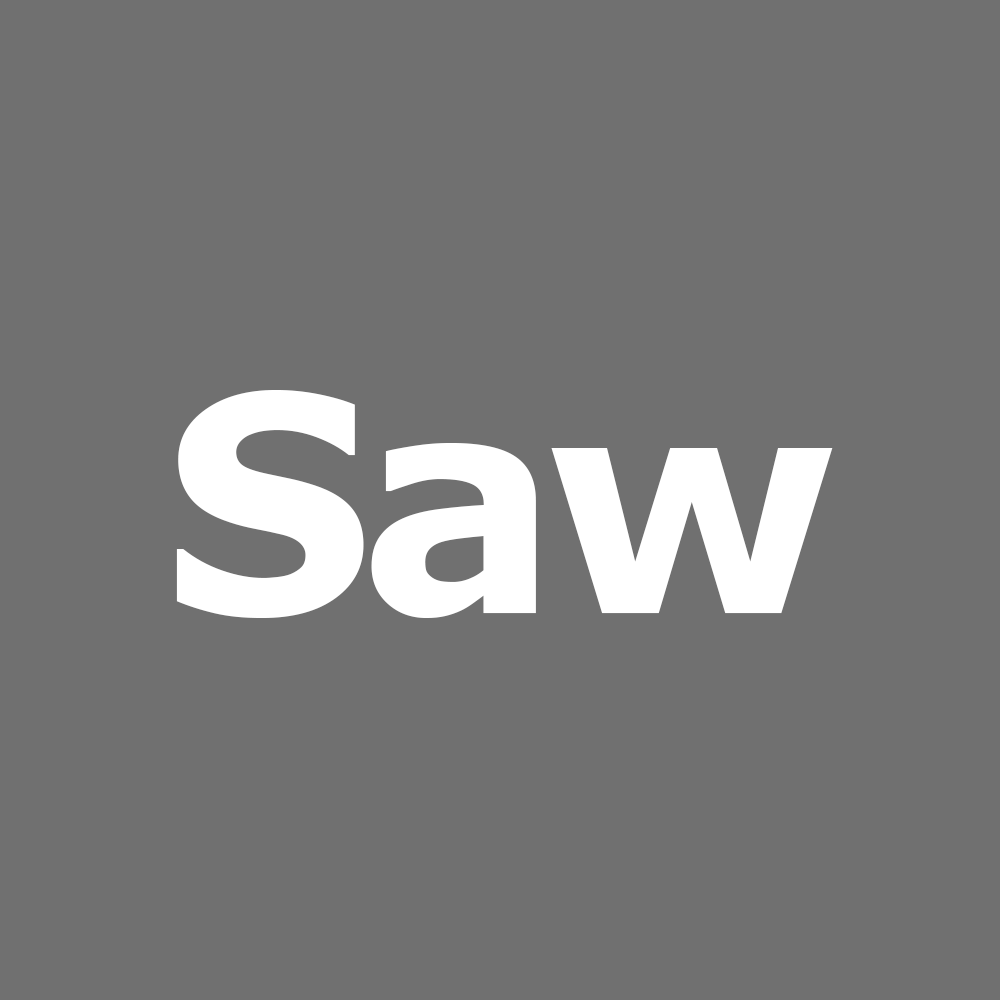
<style>
.page{position:relative;width:1000px;height:1000px;background:#707070}
.page>*{position:absolute;margin:0}
.t1{font:300px "Verdana-Bold";letter-spacing:-0.05em;color:#ffffff}
</style>
<div class="page">
<p class="t1" style="left:176px;top:390px;width:657px;height:228px">Saw</p>
</div>
